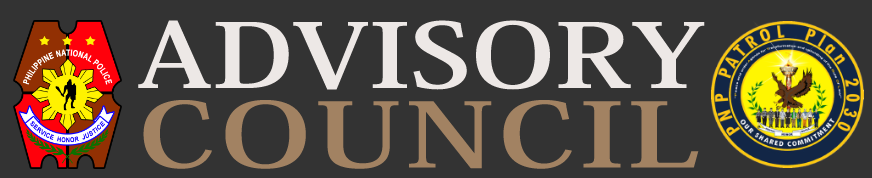
<style>
.page{position:relative;width:872px;height:178px;background:#333333}
.page>*{position:absolute;margin:0}
.t1{font:88.4px "KozMinPr6N-Bold";color:#ede8e6;scale:1.31 1}
.t2{font:88.4px "KozMinPr6N-Bold";letter-spacing:0.025em;color:#a28262;scale:1.42 1}
</style>
<div class="page">
<p class="t1" style="left:138px;top:20px;width:567px;height:70px">ADVISORY</p>
<p class="t2" style="left:143px;top:100px;width:556px;height:69px">COUNCIL</p>
</div>
